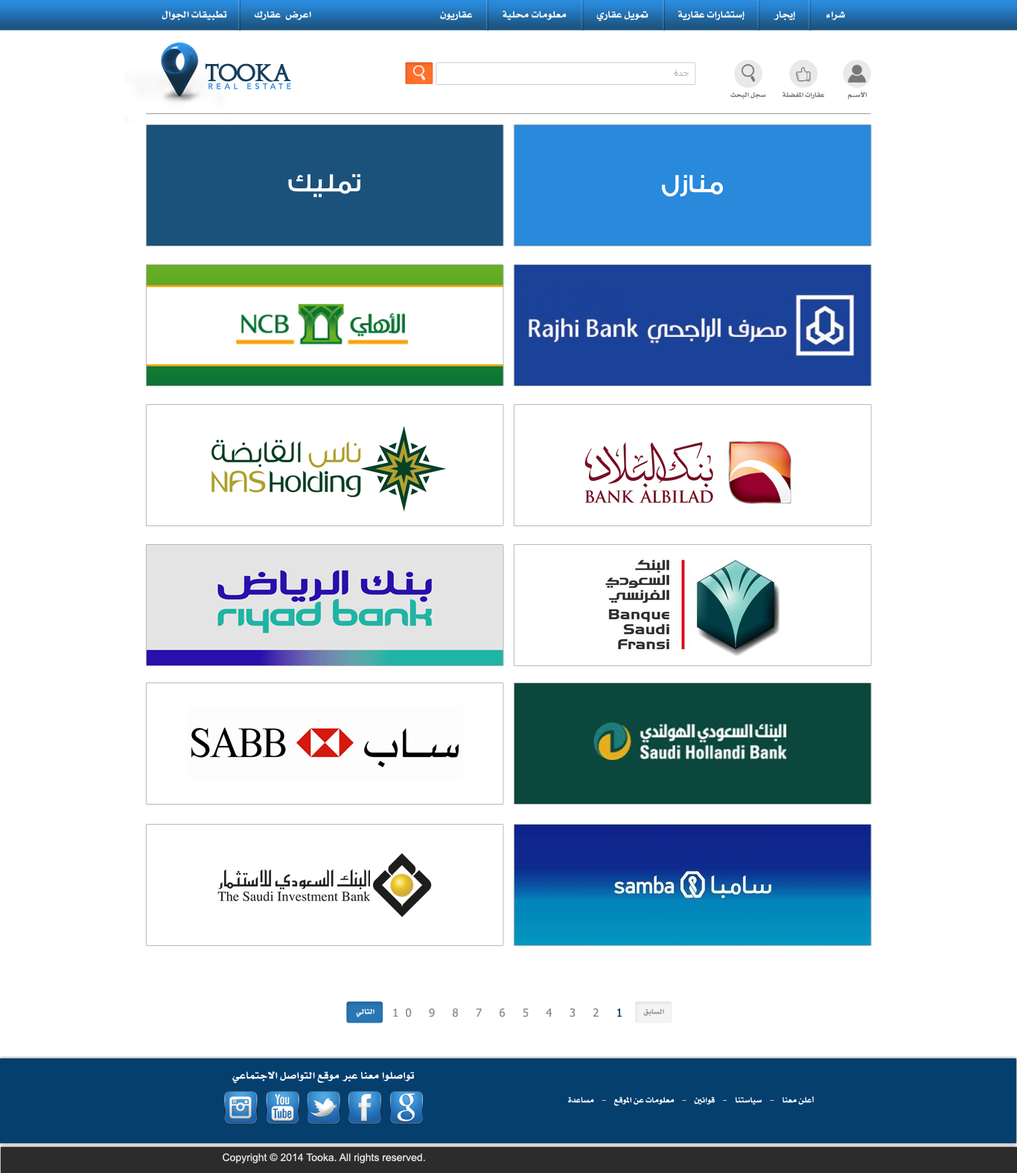
<style>
.page{position:relative;width:1017px;height:1173px;background:#ffffff}
.page>*{position:absolute;margin:0}
.t1{font:12.8px "";color:#ffffff}
.t2{font:22.1px "Augustus";letter-spacing:-0.05em;color:#173e5e;font-weight:bold}
.t3{font:8.9px "Tahoma";color:#b0b0b0}
.t4{font:7.8px "AvenirLTStd-Medium";letter-spacing:0.445em;color:#2a8cdf;text-transform:uppercase}
.t5{font:8.9px "";color:#787878}
.t6{font:26px "GESSTwoMedium-Medium";color:#ffffff}
.t7{font:9.7px "";color:#ffffff}
.t8{font:11.2px "Tahoma";letter-spacing:0.62em;color:#909090}
.t9{font:11.2px "Tahoma";letter-spacing:0.62em;color:#053f6e}
.t10{font:9.7px "";color:#93939a}
.t11{font:13.4px "";color:#ffffff}
.t12{font:10.4px "";color:#ffffff}
.t13{font:10.4px "ArialMT";color:#e3e3e3}
</style>
<div class="page">
<p class="t1" style="left:162px;top:10px;width:149px;height:10px">اعرض  عقارك           تطبيقات الجوال</p>
<p class="t1" style="left:440px;top:10px;width:405px;height:12px">شراء            إيجار            إستشارات عقارية            تمويل عقاري            معلومات محلية            عقاريون</p>
<p class="t2" style="left:205px;top:63px;width:86px;height:19px">tooka</p>
<p class="t3" style="left:674px;top:70px;width:15px;height:7px">جدة</p>
<p class="t4" style="left:208px;top:83px;width:83px;height:6px">real estate</p>
<p class="t5" style="left:730px;top:92px;width:36px;height:7px">سجل البحث</p>
<p class="t5" style="left:782px;top:92px;width:43px;height:7px">عقارات المفضلة</p>
<p class="t5" style="left:848px;top:92px;width:18px;height:8px">الاســــم</p>
<p class="t6" style="left:288px;top:174px;width:72px;height:23px">تمليك</p>
<p class="t6" style="left:662px;top:175px;width:61px;height:21px">منازل</p>
<p class="t7" style="left:356px;top:1008px;width:18px;height:9px">التالي</p>
<p class="t8" style="left:393px;top:1008px;width:228px;height:9px"><span class="t9">1 </span>2 3 4 5 6 7 8 9 10</p>
<p class="t10" style="left:643px;top:1008px;width:21px;height:8px">السابق</p>
<p class="t11" style="left:232px;top:1071px;width:183px;height:13px">تواصلوا معنا عبر موقع التواصل الاجتماعي</p>
<p class="t12" style="left:568px;top:1096px;width:246px;height:10px">أعلن معنا    -    سياستنا    -    قوانين    -    معلومات عن الموقع    -    مساعدة</p>
<p class="t13" style="left:223px;top:1153px;width:202px;height:10px">Copyright © 2014 Tooka. All rights reserved.</p>
</div>
